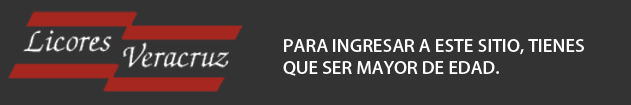
<style>
.page{position:relative;width:631px;height:105px;background:#333333}
.page>*{position:absolute;margin:0}
.t1{font:17.1px "KozGoPr6N-Medium";color:#ffffff;scale:1.05 1}
</style>
<div class="page">
<p class="t1" style="left:283px;top:39px;width:301px;height:37px">PARA INGRESAR A ESTE SITIO, TIENES QUE SER MAYOR DE EDAD.</p>
</div>
